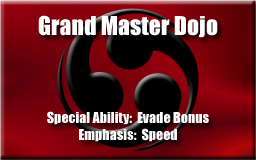
<style>
.page{position:relative;width:256px;height:160px}
.page>*{position:absolute;margin:0}
.t1{font:24px "Impact";color:#ffffff}
.t2{font:14px "Impact";color:#ffffff}
</style>
<div class="page">
<p class="t1" style="left:38px;top:15px;width:180px;height:23px">Grand Master Dojo</p>
<p class="t2" style="left:47px;top:111px;width:162px;height:14px">Special Ability:  Evade Bonus</p>
<p class="t2" style="left:79px;top:128px;width:98px;height:14px">Emphasis:  Speed</p>
</div>
